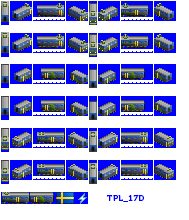
<style>
.page{position:relative;width:189px;height:220px;background:#ffffff}
.page>*{position:absolute;margin:0}
.t1{font:8px "Museo700-Regular";letter-spacing:0.075em;color:#0000ff;text-transform:uppercase}
</style>
<div class="page">
<p class="t1" style="left:107px;top:195px;width:37px;height:7px">TPL_17d</p>
</div>
